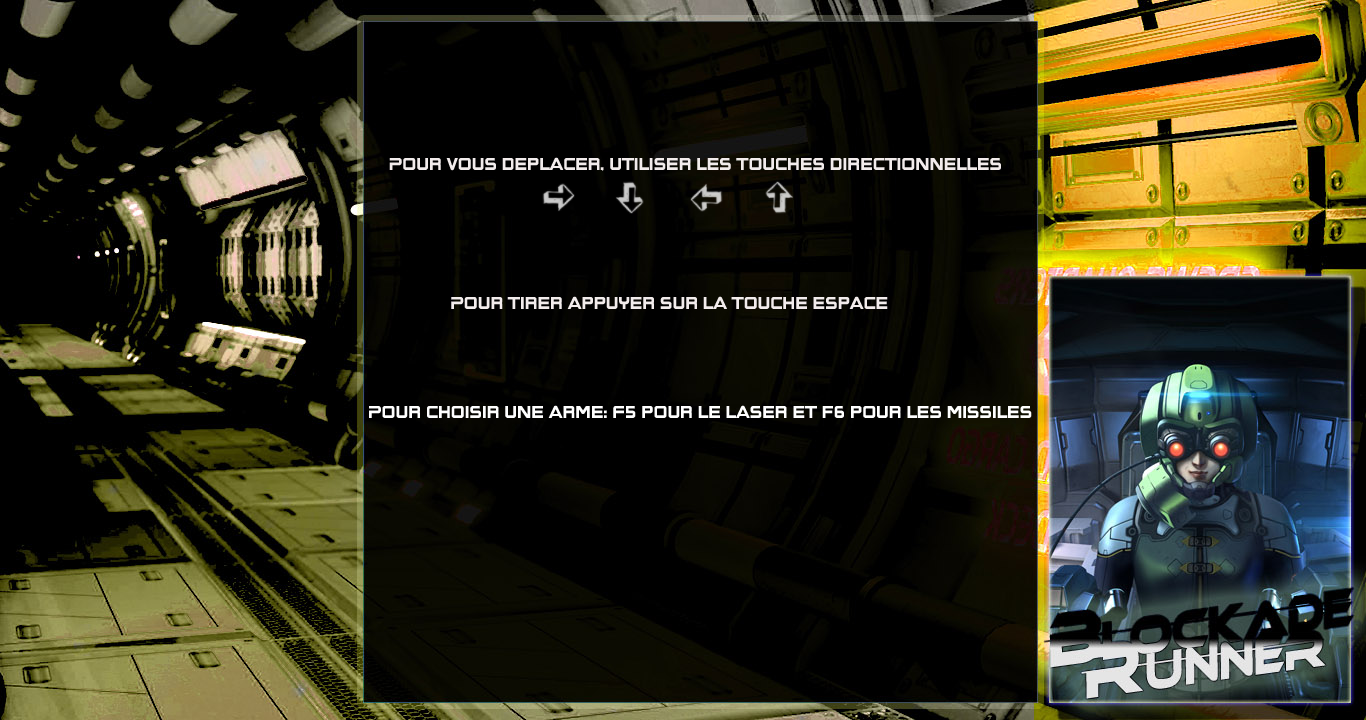
<style>
.page{position:relative;width:1366px;height:720px;background:#000000}
.page>*{position:absolute;margin:0}
.t1{font:14px "BoomBox-2";color:#f2ecec}
.t2{font:14px "BoomBox-2";color:#ffffff}
</style>
<div class="page">
<p class="t1" style="left:389px;top:157px;width:612px;height:14px">Pour vous deplacer, utiliser les touches directionnelles</p>
<p class="t1" style="left:451px;top:296px;width:437px;height:13px">Pour tirer appuyer sur la touche espace</p>
<p class="t2" style="left:369px;top:405px;width:663px;height:13px">Pour choisir une arme: F5 pour le laser et f6 pour les missiles</p>
</div>
